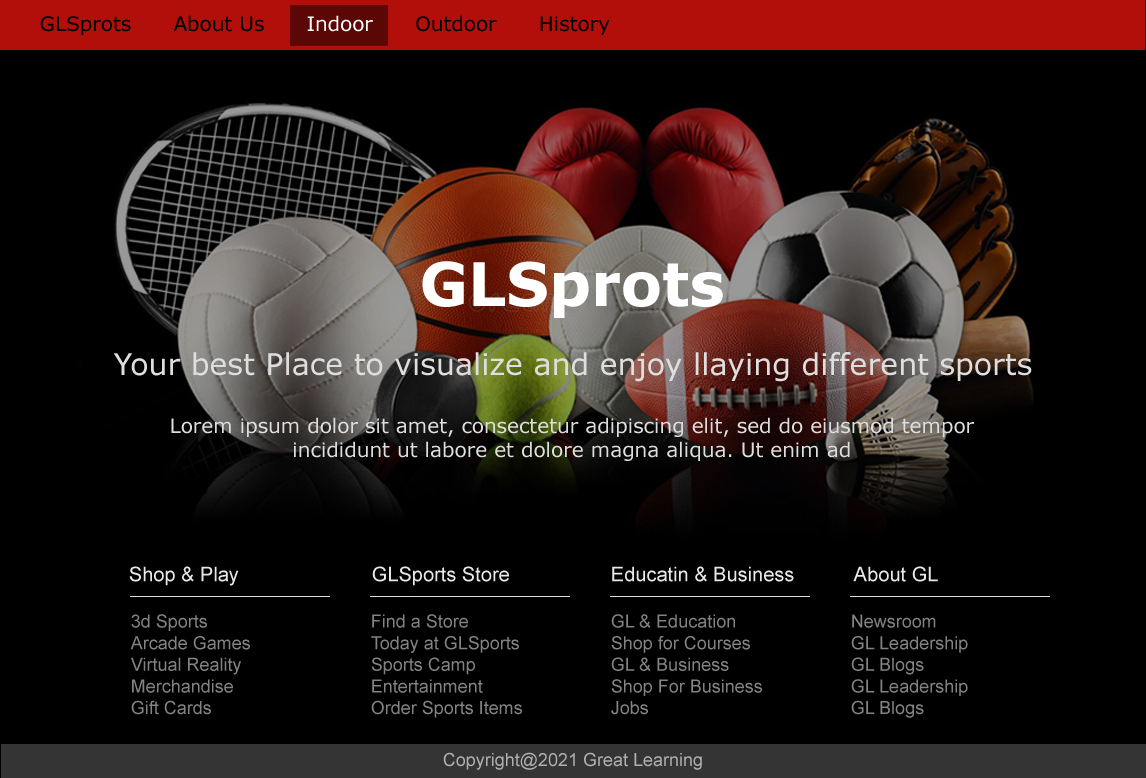
<style>
.page{position:relative;width:1146px;height:778px;background:#000000}
.page>*{position:absolute;margin:0}
.t1{font:20px "Verdana";color:#000000}
.t2{font:20px "Verdana";color:#fffefe}
.t3{font:60px "Verdana-Bold";color:#ffffff}
.t4{font:30px "Verdana";color:#dfdede}
.t5{font:20px "Verdana";color:#dfdede}
.t6{font:20px "ArialMT";color:#e8e8e8}
.t7{font:18px "ArialMT";color:#848282}
.t8{font:18px "ArialMT";color:#b1b0b0}
</style>
<div class="page">
<p class="t1" style="left:40px;top:15px;width:570px;height:20px">GLSprots      About Us      <span class="t2">Indoor      </span>Outdoor      History</p>
<p class="t3" style="left:422px;top:261px;width:301px;height:57px">GLSprots</p>
<p class="t4" style="left:113px;top:352px;width:919px;height:30px">Your best Place to visualize and enjoy llaying different sports</p>
<p class="t5" style="left:171px;top:417px;width:803px;height:44px;text-align:center">Lorem ipsum dolor sit amet, consectetur adipiscing elit, sed do eiusmod tempor <br>incididunt ut labore et dolore magna aliqua. Ut enim ad</p>
<p class="t6" style="left:129px;top:566px;width:110px;height:20px">Shop &amp; Play</p>
<p class="t6" style="left:372px;top:566px;width:137px;height:20px">GLSports Store</p>
<p class="t6" style="left:612px;top:566px;width:182px;height:16px">Educatin &amp; Business</p>
<p class="t6" style="left:853px;top:566px;width:85px;height:16px">About GL</p>
<p class="t7" style="left:130px;top:614px;width:120px;height:101px">3d Sports<br>Arcade Games<br>Virtual Reality<br>Merchandise<br>Gift Cards</p>
<p class="t7" style="left:371px;top:614px;width:151px;height:104px">Find a Store<br>Today at GLSports<br>Sports Camp<br>Entertainment<br>Order Sports Items</p>
<p class="t7" style="left:611px;top:614px;width:151px;height:101px">GL &amp; Education<br>Shop for Courses<br>GL &amp; Business<br>Shop For Business<br>Jobs</p>
<p class="t7" style="left:851px;top:614px;width:117px;height:104px">Newsroom<br>GL Leadership<br>GL Blogs<br>GL Leadership<br>GL Blogs</p>
<p class="t8" style="left:443px;top:752px;width:259px;height:18px">Copyright@2021 Great Learning</p>
</div>
